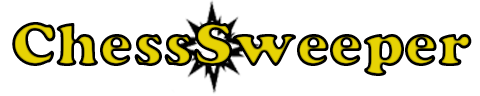
<style>
.page{position:relative;width:480px;height:96px;background:#ffffff}
.page>*{position:absolute;margin:0}
.t1{font:60px "CooperBlackStd"}
</style>
<div class="page">
<p class="t1" style="left:12px;top:22px;width:460px;height:54px">ChessSweeper</p>
</div>
